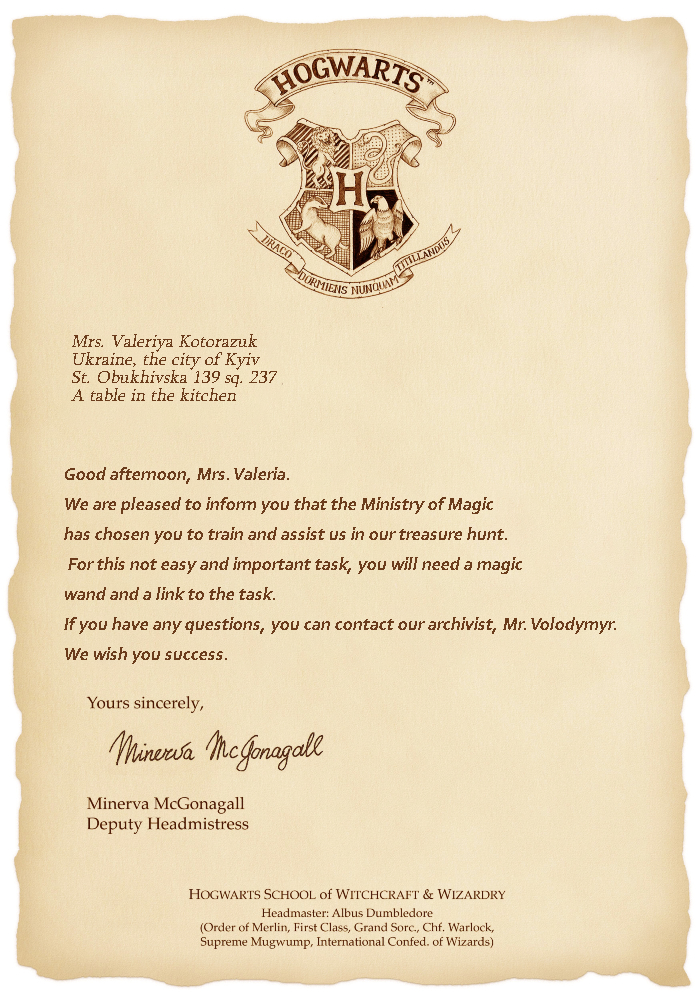
<style>
.page{position:relative;width:700px;height:1000px}
.page>*{position:absolute;margin:0}
.t1{font:18px/18px "Sylfaen";color:#6b3c1c;font-style:italic}
.t2{font:18px/30px "Corbel-Bold";color:#6b3c1c;font-style:italic}
</style>
<div class="page">
<p class="t1" style="left:71px;top:334px;width:206px;height:67px">Mrs. Valeriya Kotorazuk<br>Ukraine, the city of Kyiv<br>St. Obukhivska 139 sq. 237<br>A table in the kitchen</p>
<p class="t2" style="left:64px;top:467px;width:552px;height:197px">Good afternoon, Mrs. Valeria.<br>We are pleased to inform you that the Ministry of Magic <br>has chosen you to train and assist us in our treasure hunt.<br> For this not easy and important task, you will need a magic <br>wand and a link to the task. <br>If you have any questions, you can contact our archivist, Mr. Volodymyr.<br>We wish you success.</p>
</div>
